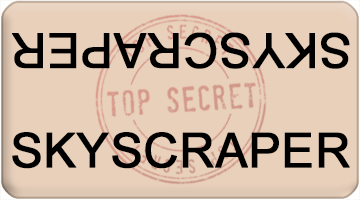
<style>
.page{position:relative;width:360px;height:200px;background:#e8d0bb}
.page>*{position:absolute;margin:0}
.t1{font:48px "ArialMT";color:#000000;font-weight:bold}
</style>
<div class="page">
<p class="t1" style="left:12px;top:32px;width:338px;height:37px;rotate:180deg">SKYSCRAPER</p>
<p class="t1" style="left:12px;top:132px;width:338px;height:37px">SKYSCRAPER</p>
</div>
